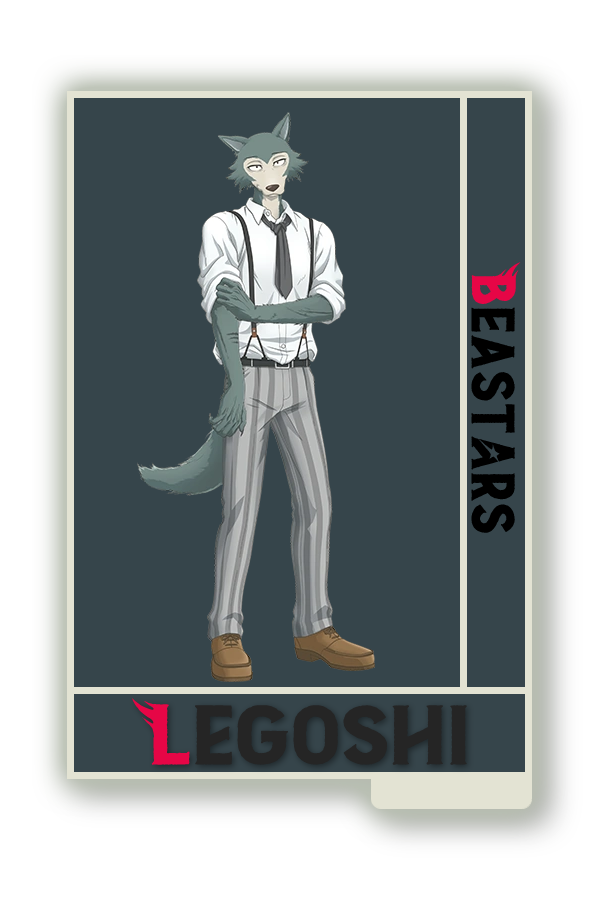
<style>
.page{position:relative;width:600px;height:900px;background:#36454b}
.page>*{position:absolute;margin:0}
.t1{font:48.8px "BEAST";color:#000000}
.t2{font:48.8px "BEAST";color:#e60646}
.t3{font:67px "BEAST";color:#252525;scale:1.12 1}
.t4{font:67px "BEAST";color:#e60646;scale:1.12 1}
</style>
<div class="page">
<p class="t1" style="left:471px;top:262px;width:50px;height:271px;rotate:90deg"><span class="t2">B</span>east@rs</p>
<p class="t3" style="left:132px;top:698px;width:335px;height:67px"><span class="t4">L</span>egoshi</p>
</div>
